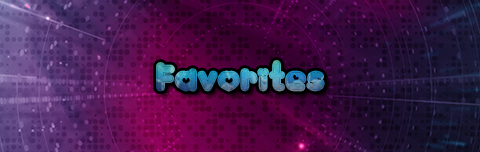
<style>
.page{position:relative;width:480px;height:152px}
.page>*{position:absolute;margin:0}
.t1{font:36px "Kinkie";font-weight:bold}
</style>
<div class="page">
<p class="t1" style="left:156px;top:60px;width:169px;height:32px">Favorites</p>
</div>
